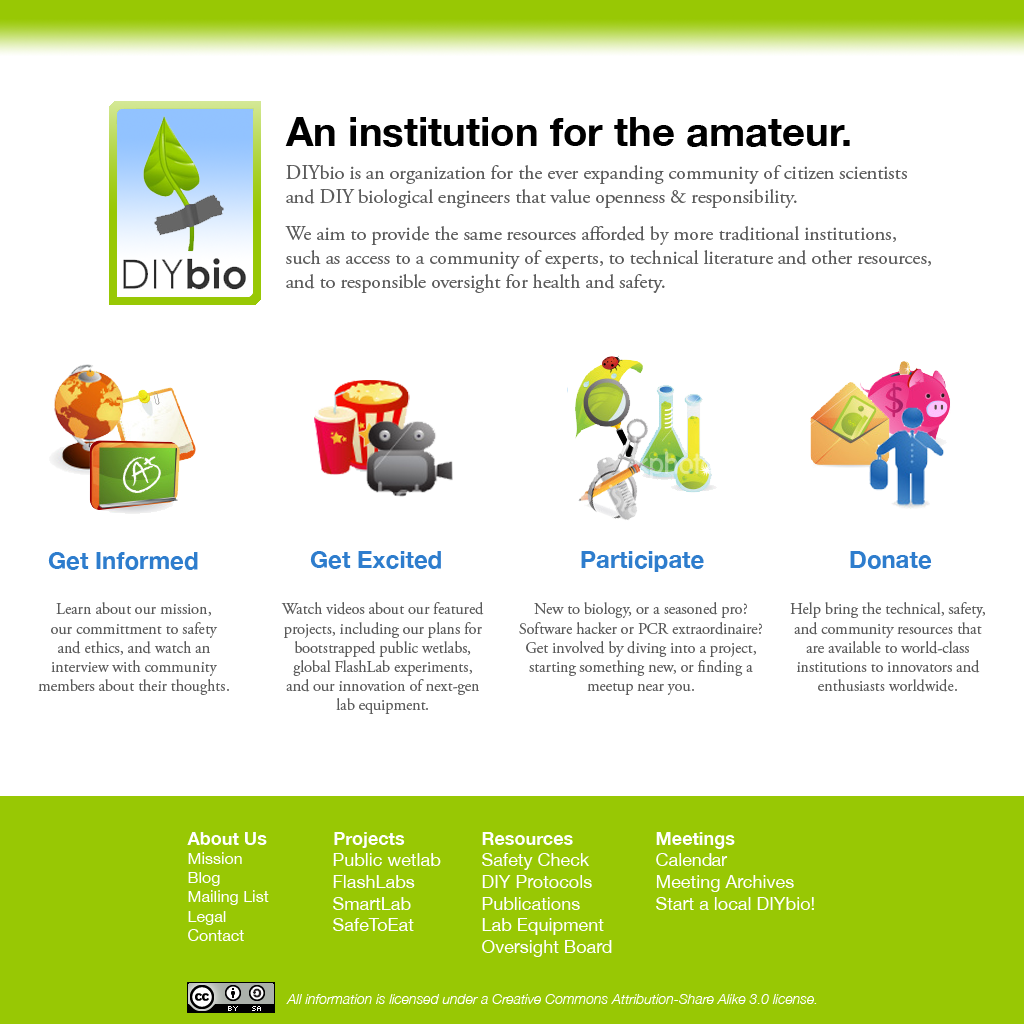
<style>
.page{position:relative;width:1024px;height:1024px;background:#ffffff}
.page>*{position:absolute;margin:0}
.t1{font:40px "HelveticaNeue-Bold";color:#000000}
.t2{font:20px "AGaramondPro-Regular";color:#5b5b5b}
.t3{font:24px "HelveticaNeue-Bold";color:#2e7dcd}
.t4{font:16px "AGaramondPro-Regular";color:#5b5b5b}
.t5{font:16px "HelveticaNeue";color:#ffffff}
.t6{font:18px "HelveticaNeue-Bold";color:#ffffff}
.t7{font:18px "HelveticaNeue";color:#ffffff}
.t8{font:14px "HelveticaNeue-LightItalic";color:#ffffff}
</style>
<div class="page">
<p class="t1" style="left:285px;top:117px;width:565px;height:30px">An institution for the amateur.</p>
<p class="t2" style="left:286px;top:165px;width:621px;height:43px">DIYbio is an organization for the ever expanding community of citizen scientists and DIY biological engineers that value openness &amp; responsibility.</p>
<p class="t2" style="left:285px;top:226px;width:646px;height:67px">We aim to provide the same resources afforded by more traditional institutions, such as access to a community of experts, to technical literature and other resources, and to responsible oversight for health and safety.</p>
<p class="t3" style="left:48px;top:552px;width:150px;height:18px">Get Informed</p>
<p class="t3" style="left:310px;top:551px;width:131px;height:18px">Get Excited</p>
<p class="t3" style="left:581px;top:551px;width:123px;height:21px">Participate</p>
<p class="t3" style="left:850px;top:551px;width:82px;height:18px">Donate</p>
<p class="t4" style="left:38px;top:602px;width:191px;height:93px;text-align:justify">Learn about our mission,<br>our committment to safety<br>and ethics, and watch an<br>interview with community<br>members about their thoughts.</p>
<p class="t4" style="left:281px;top:602px;width:203px;height:112px;text-align:center">Watch videos about our featured<br>projects, including our plans for<br>bootstrapped public wetlabs,<br>global FlashLab experiments,<br>and our innovation of next-gen<br>lab equipment.</p>
<p class="t4" style="left:519px;top:602px;width:243px;height:93px;text-align:center">New to biology, or a seasoned pro?  Software hacker or PCR extraordinaire?<br>Get involved by diving into a project, starting something new, or finding a meetup near you.</p>
<p class="t4" style="left:790px;top:602px;width:195px;height:90px;text-align:center">Help bring the technical, safety,<br>and community resources that<br>are available to world-class<br>institutions to innovators and<br>enthusiasts worldwide.</p>
<p class="t5" style="left:187px;top:832px;width:82px;height:109px"><span class="t6">About Us<br></span>Mission<br>Blog<br>Mailing List<br>Legal<br>Contact</p>
<p class="t7" style="left:333px;top:832px;width:108px;height:99px"><span class="t6">Projects<br></span>Public wetlab<br>FlashLabs<br>SmartLab<br>SafeToEat</p>
<p class="t7" style="left:482px;top:832px;width:130px;height:125px"><span class="t6">Resources<br></span>Safety Check<br>DIY Protocols<br>Publications<br>Lab Equipment<br>Oversight Board</p>
<p class="t7" style="left:656px;top:832px;width:158px;height:78px"><span class="t6">Meetings<br></span>Calendar<br>Meeting Archives<br>Start a local DIYbio!</p>
<p class="t8" style="left:286px;top:994px;width:531px;height:10px">All information is licensed under a Creative Commons Attribution-Share Alike 3.0 license.</p>
</div>
